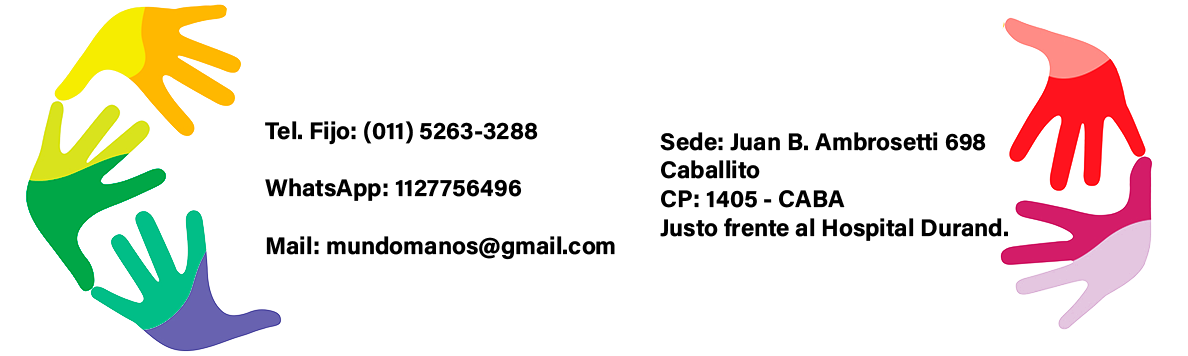
<style>
.page{position:relative;width:1188px;height:356px;background:#ffffff}
.page>*{position:absolute;margin:0}
.t1{font:24px "AcuminConcept-Bold";color:#000000}
</style>
<div class="page">
<p class="t1" style="left:265px;top:121px;width:350px;height:139px">Tel. Fijo: (011) 5263-3288<br><br>WhatsApp: 1127756496<br><br>Mail: mundomanos@gmail.com</p>
<p class="t1" style="left:660px;top:132px;width:348px;height:109px">Sede: Juan B. Ambrosetti 698<br>Caballito<br>CP: 1405 - CABA<br>Justo frente al Hospital Durand.</p>
</div>
